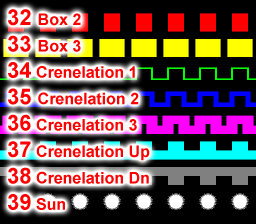
<style>
.page{position:relative;width:256px;height:224px;background:#000000}
.page>*{position:absolute;margin:0}
.t1{font:16px "Arial-BoldMT";color:#ff0000}
.t2{font:22px "Arial-BoldMT";color:#ff0000}
</style>
<div class="page">
<p class="t1" style="left:8px;top:9px;width:142px;height:201px"><span class="t2">32 </span>Box 2<br><span class="t2">33 </span>Box 3<br><span class="t2">34</span> Crenelation 1<br><span class="t2">35 </span>Crenelation 2<br><span class="t2">36</span> Crenelation 3<br><span class="t2">37</span> Crenelation Up<br><span class="t2">38</span> Crenelation Dn<br><span class="t2">39</span> Sun</p>
</div>
